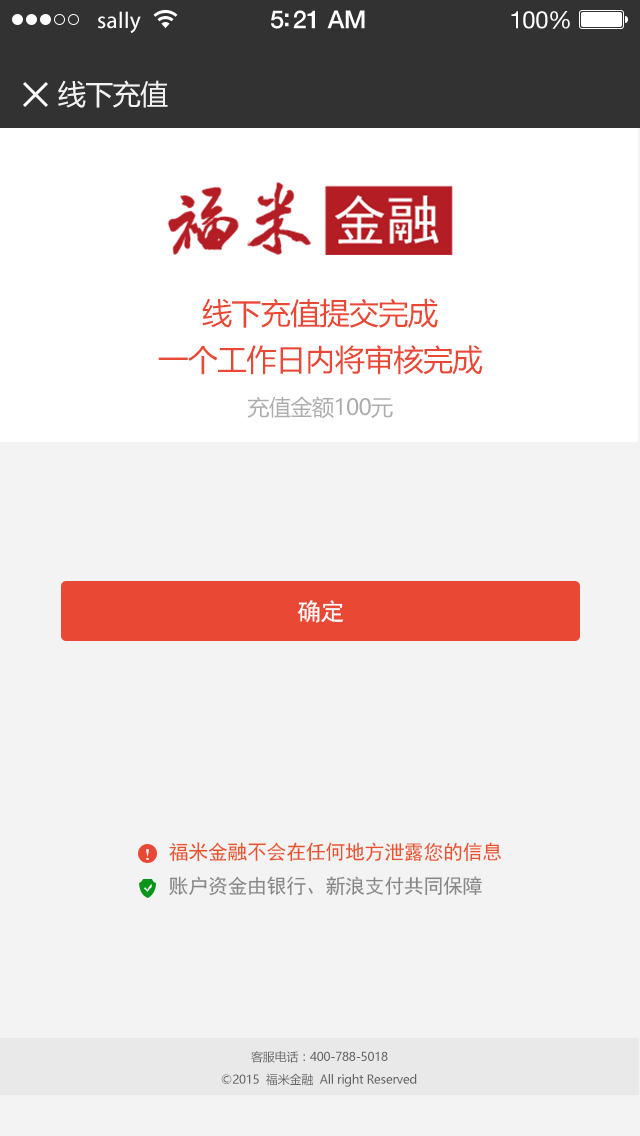
<style>
.page{position:relative;width:640px;height:1136px;background:#f3f3f3}
.page>*{position:absolute;margin:0}
.t1{font:23px "MyriadPro-Regular";letter-spacing:0.02em;color:#ffffff}
.t2{font:25px "HelveticaNeue-Medium";letter-spacing:-0.02em;color:#ffffff}
.t3{font:24px "HelveticaNeue";letter-spacing:-0.02em;color:#ffffff}
.t4{font:28px "MicrosoftYaHei";letter-spacing:-0.02em;color:#f3f3f3}
.t5{font:30px "MicrosoftYaHei";letter-spacing:-0.02em;color:#e94834}
.t6{font:22px "MicrosoftYaHei";letter-spacing:-0.02em;color:#acacac}
.t7{font:24px "SimHei";letter-spacing:-0.02em;color:#ffffff}
.t8{font:20px "SimHei";letter-spacing:-0.02em;color:#ea522b}
.t9{font:20px "SimHei";letter-spacing:-0.02em;color:#878787}
.t10{font:12px "MicrosoftYaHei";letter-spacing:-0.02em;color:#646464}
</style>
<div class="page">
<p class="t1" style="left:98px;top:11px;width:43px;height:22px">sally</p>
<p class="t2" style="left:271px;top:10px;width:94px;height:19px">5:21 AM</p>
<p class="t3" style="left:511px;top:11px;width:59px;height:18px">100%</p>
<p class="t4" style="left:58px;top:80px;width:110px;height:28px">线下充值</p>
<p class="t5" style="left:202px;top:298px;width:236px;height:30px">线下充值提交完成</p>
<p class="t5" style="left:158px;top:345px;width:325px;height:30px">一个工作日内将审核完成</p>
<p class="t6" style="left:247px;top:396px;width:146px;height:23px">充值金额100元</p>
<p class="t7" style="left:297px;top:600px;width:47px;height:23px">确定</p>
<p class="t8" style="left:169px;top:842px;width:333px;height:20px">福米金融不会在任何地方泄露您的信息</p>
<p class="t9" style="left:169px;top:876px;width:313px;height:20px">账户资金由银行、新浪支付共同保障</p>
<p class="t10" style="left:251px;top:1051px;width:137px;height:12px">客服电话：400-788-5018</p>
<p class="t10" style="left:221px;top:1073px;width:196px;height:14px">©2015  福米金融  All right Reserved</p>
</div>
